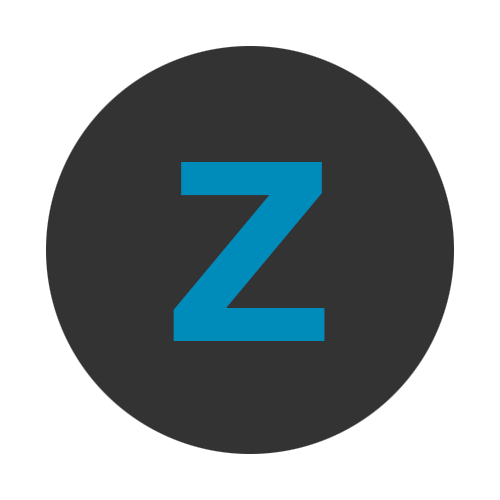
<style>
.page{position:relative;width:500px;height:500px;background:#ffffff}
.page>*{position:absolute;margin:0}
.t1{font:250px "HelveticaNeue-Bold";color:#008cba}
</style>
<div class="page">
<p class="t1" style="left:173px;top:162px;width:152px;height:179px">Z</p>
</div>
